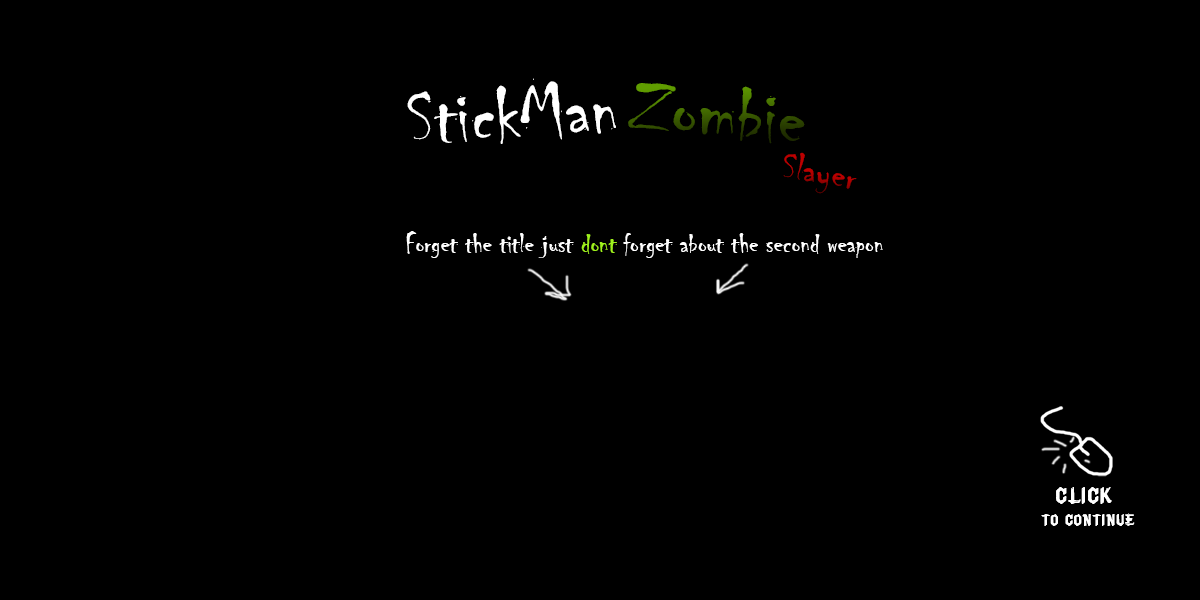
<style>
.page{position:relative;width:1200px;height:600px;background:#000000}
.page>*{position:absolute;margin:0}
.t1{font:80.2px "Chiller-Regular";color:#ffffff}
.t2{font:81.1px "Chiller-Regular";scale:1.04 1}
.t3{font:40px "Chiller-Regular";color:#b40000;scale:1.04 1}
.t4{font:28px "Chiller-Regular";color:#ffffff}
.t5{font:28px "Chiller-Regular";color:#9ff21c}
.t6{font:18px "BruceMikita";color:#ffffff}
.t7{font:26px "BruceMikita";color:#ffffff}
</style>
<div class="page">
<p class="t1" style="left:407px;top:78px;width:209px;height:66px;rotate:-3deg">StickMan</p>
<p class="t2" style="left:628px;top:83px;width:177px;height:61px;rotate:5deg">Zombie</p>
<p class="t3" style="left:783px;top:152px;width:74px;height:42px;rotate:10deg">Slayer</p>
<p class="t4" style="left:406px;top:231px;width:477px;height:27px">Forget the title just <span class="t5">dont</span> forget about the second weapon</p>
<p class="t6" style="left:1041px;top:487px;width:94px;height:39px;text-align:center"><span class="t7">Click <br></span>to Continue</p>
</div>
